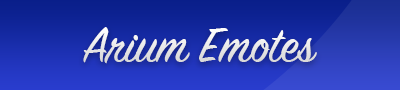
<style>
.page{position:relative;width:400px;height:90px}
.page>*{position:absolute;margin:0}
.t1{font:53.8px "SignPainterHouseScript";color:#e6e6e6}
</style>
<div class="page">
<p class="t1" style="left:83px;top:27px;width:234px;height:37px">Arium Emotes</p>
</div>
